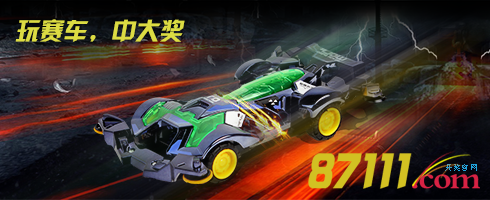
<style>
.page{position:relative;width:490px;height:200px}
.page>*{position:absolute;margin:0}
.t1{font:24px "JLinXin";color:#dcdc43;font-style:italic}
.t2{font:51.5px "JLinXin";color:#d2c122;font-style:italic}
.t3{font:33.4px "Ò¶¸ùÓÑÃ«±ÊÐÐÊé";letter-spacing:-0.05em;color:#d82244}
.t4{font:8.4px "SimSun";color:#20a2dc}
</style>
<div class="page">
<p class="t1" style="left:15px;top:19px;width:170px;height:23px">玩赛车，中大奖</p>
<p class="t2" style="left:308px;top:153px;width:104px;height:36px">87111</p>
<p class="t3" style="left:412px;top:174px;width:68px;height:15px">.com</p>
<p class="t4" style="left:445px;top:164px;width:32px;height:7px">开奖官网</p>
</div>
